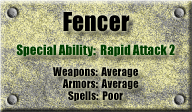
<style>
.page{position:relative;width:192px;height:112px}
.page>*{position:absolute;margin:0}
.t1{font:24px "Impact";color:#000000}
.t2{font:13px "Impact";color:#003c00}
.t3{font:11px "Impact";color:#000000}
</style>
<div class="page">
<p class="t1" style="left:63px;top:12px;width:67px;height:20px">Fencer</p>
<p class="t2" style="left:16px;top:44px;width:159px;height:13px">Special Ability:  Rapid Attack 2</p>
<p class="t3" style="left:53px;top:67px;width:85px;height:11px">Weapons:  Average</p>
<p class="t3" style="left:62px;top:79px;width:77px;height:11px">Armors:  Average</p>
<p class="t3" style="left:68px;top:91px;width:55px;height:10px">Spells:  Poor</p>
</div>
